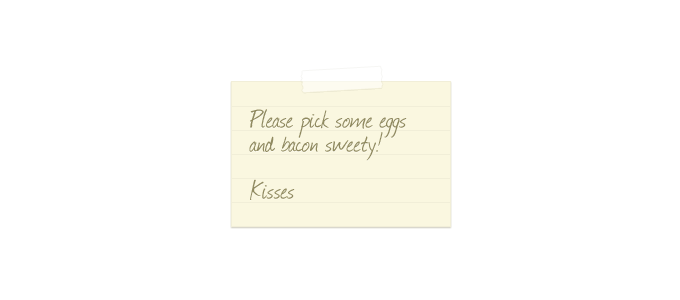
<style>
.page{position:relative;width:680px;height:300px;background:#ffffff}
.page>*{position:absolute;margin:0}
.t1{font:30px/24px "Journal";color:#908a60}
.t2{font:30px "Journal";color:#908a60}
</style>
<div class="page">
<p class="t1" style="left:249px;top:109px;width:158px;height:52px">Please pick some eggs and bacon sweety!</p>
<p class="t2" style="left:250px;top:179px;width:45px;height:21px">Kisses</p>
</div>
